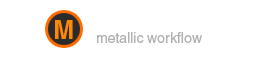
<style>
.page{position:relative;width:253px;height:57px;background:#ffffff}
.page>*{position:absolute;margin:0}
.t1{font:25.3px "Helvetica-Bold";color:#ff8a00}
.t2{font:14px "Helvetica";color:#b0b0b0}
</style>
<div class="page">
<p class="t1" style="left:55px;top:20px;width:18px;height:19px">M</p>
<p class="t2" style="left:97px;top:32px;width:105px;height:11px">metallic workflow</p>
</div>
